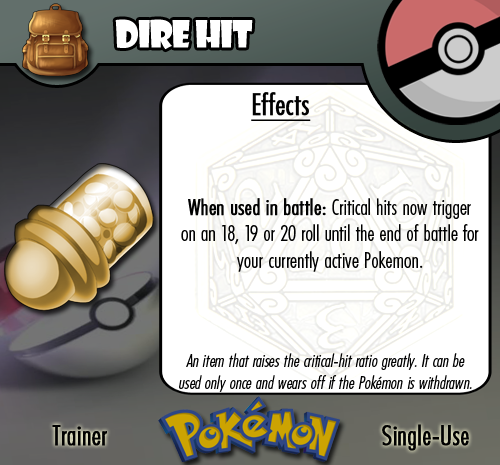
<style>
.page{position:relative;width:500px;height:465px}
.page>*{position:absolute;margin:0}
.t1{font:36.7px "ShowcardGothic-Reg";letter-spacing:-0.025em;color:#ffffff;scale:0.91 1}
.t2{font:22.2px "FuturaCondensedBQ-Light";color:#010101}
.t3{font:27.8px "FuturaCondensedBQ-Light";color:#010101;font-weight:bold}
.t4{font:30.6px "FuturaCondensedBQ-Light";color:#010101;font-weight:bold;text-decoration:underline}
.t5{font:22.2px "FuturaCondensedBQ-Light";color:#010101;font-weight:bold}
.t6{font:18.1px "FuturaCondensedBQ-Light";color:#010101;font-style:italic}
</style>
<div class="page">
<p class="t1" style="left:115px;top:19px;width:138px;height:31px">Dire Hit</p>
<p class="t2" style="left:181px;top:92px;width:298px;height:180px"><span class="t3">  </span><span class="t4">Effects<br><br><br><br><br><br></span><span class="t5">When used in battle: </span>Critical hits now trigger on an 18, 19 or 20 roll until the end of battle for your currently active Pokemon.</p>
<p class="t6" style="left:179px;top:353px;width:293px;height:39px;text-align:center">An item that raises the critical-hit ratio greatly. It can be used only once and wears off if the Pokémon is withdrawn.</p>
<p class="t3" style="left:52px;top:425px;width:55px;height:21px">Trainer</p>
<p class="t3" style="left:382px;top:424px;width:87px;height:27px">Single-Use</p>
</div>
